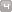
<style>
.page{position:relative;width:12px;height:12px;background:#aba5a5}
.page>*{position:absolute;margin:0}
.t1{font:8px "Kroeger0553";color:#ffffff}
</style>
<div class="page">
<p class="t1" style="left:4px;top:4px;width:5px;height:5px">4</p>
</div>
